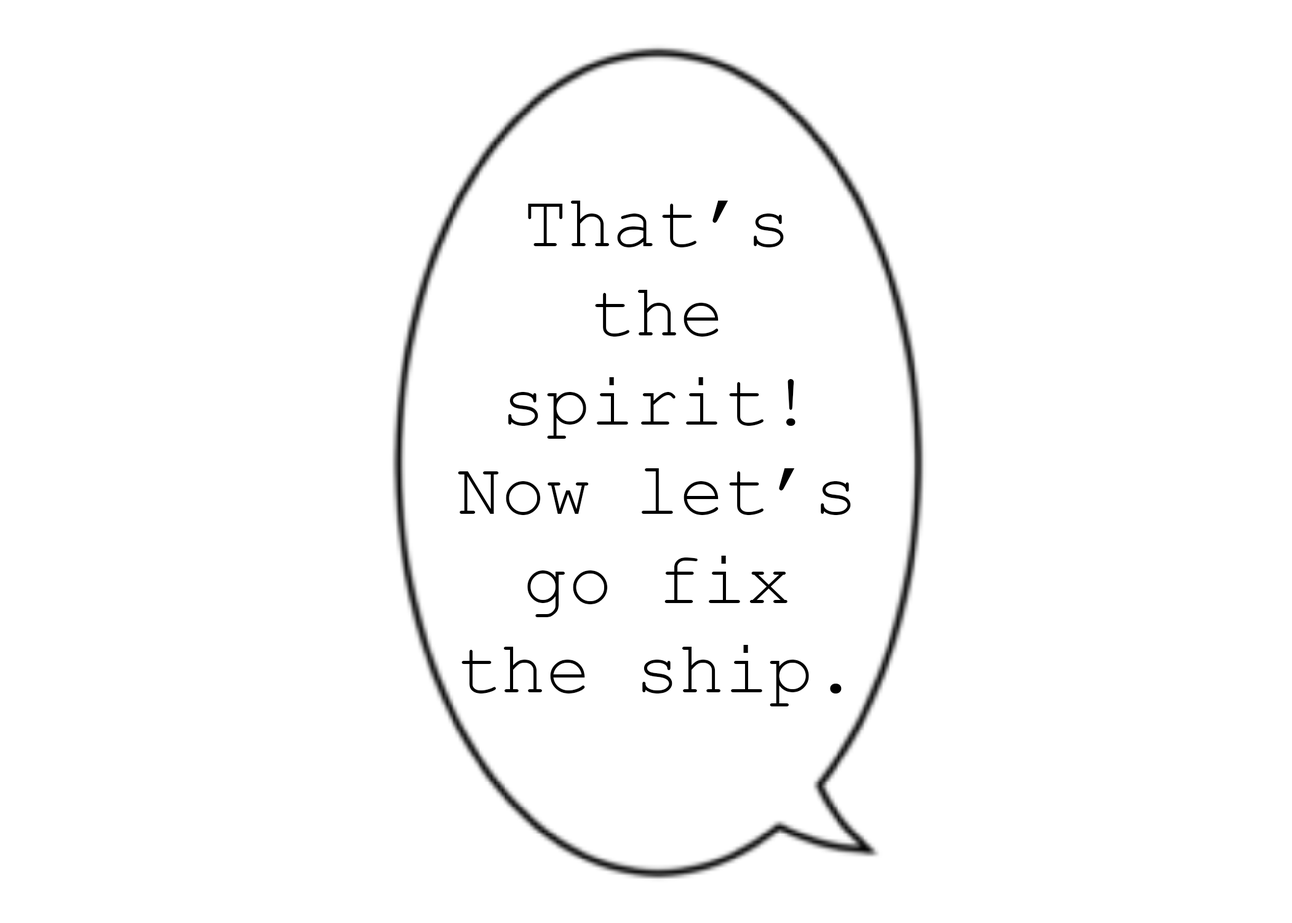
<style>
.page{position:relative;width:1292px;height:923px;background:#ffffff}
.page>*{position:absolute;margin:0}
.t1{font:74.3px "CourierNewPSMT";color:#000000}
</style>
<div class="page">
<p class="t1" style="left:458px;top:201px;width:393px;height:505px;text-align:center">That’s the spirit! Now let’s go fix the ship.</p>
</div>
